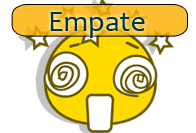
<style>
.page{position:relative;width:196px;height:133px;background:#ffffff}
.page>*{position:absolute;margin:0}
.t1{font:30px "Candara";color:#00334b}
</style>
<div class="page">
<p class="t1" style="left:50px;top:12px;width:95px;height:26px">Empate</p>
</div>
